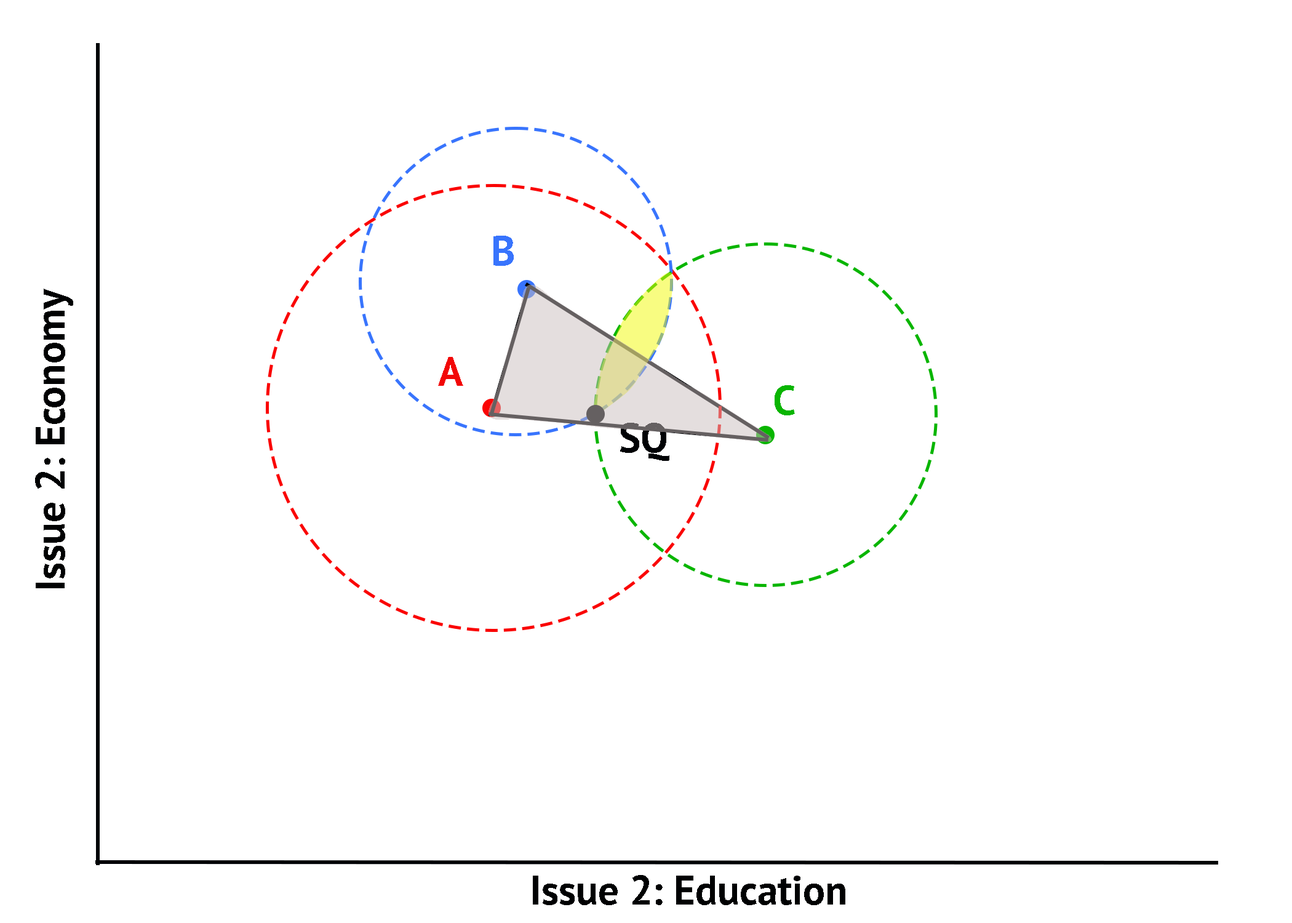
<style>
.page{position:relative;width:1292px;height:923px;background:#ffffff}
.page>*{position:absolute;margin:0}
.t1{font:41px "PTSans-Bold";color:#3874fd}
.t2{font:41px "PTSans-Bold";color:#000102}
.t3{font:41px "PTSans-Bold";color:#f20707}
.t4{font:41px "PTSans-Bold";color:#09b500}
.t5{font:41px "PTSans-Bold";color:#000205}
</style>
<div class="page">
<p class="t1" style="left:493px;top:236px;width:21px;height:30px">B</p>
<p class="t2" style="left:35px;top:289px;width:38px;height:299px;rotate:-90deg">Issue 2: Economy</p>
<p class="t3" style="left:438px;top:357px;width:25px;height:29px">A</p>
<p class="t4" style="left:775px;top:385px;width:20px;height:30px">C</p>
<p class="t5" style="left:620px;top:423px;width:49px;height:38px">SQ</p>
<p class="t2" style="left:533px;top:875px;width:312px;height:30px">Issue 2: Education</p>
</div>
